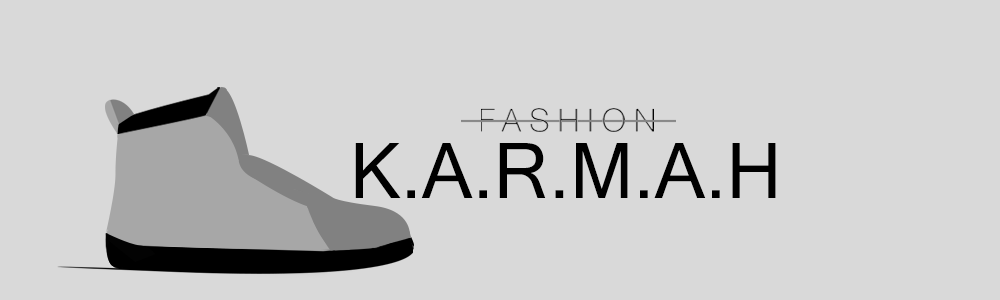
<style>
.page{position:relative;width:1000px;height:300px;background:#d9d9d9}
.page>*{position:absolute;margin:0}
.t1{font:76.9px "MicrosoftSansSerif";color:#000000}
</style>
<div class="page">
<p class="t1" style="left:355px;top:143px;width:421px;height:55px">K.A.R.M.A.H</p>
</div>
